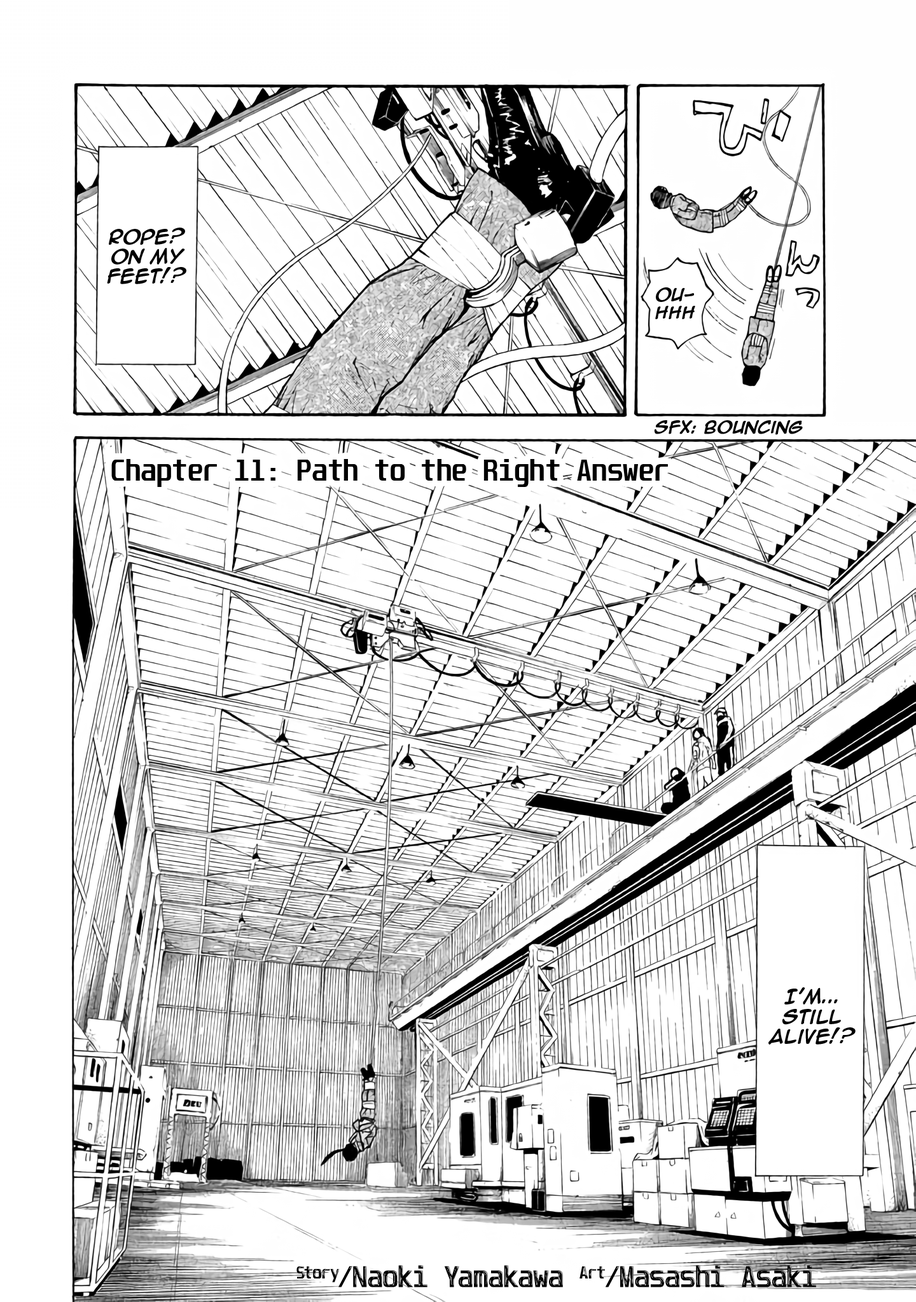
<style>
.page{position:relative;width:916px;height:1302px;background:#ffffff}
.page>*{position:absolute;margin:0}
.t1{font:16.5px "AnimeAce2.0BB-Bold";color:#000000}
.t2{font:14.6px "AnimeAce2.0BB-Bold";color:#000000}
.t3{font:15.9px "AnimeAce2.0BB-Italic";color:#000000;font-weight:bold}
.t4{font:25.4px "Unispace-Bold";color:#000000}
</style>
<div class="page">
<p class="t1" style="left:107px;top:228px;width:79px;height:56px;text-align:center">Rope? on my feet!?</p>
<p class="t2" style="left:655px;top:287px;width:40px;height:32px;text-align:center">Ou-<br>hhh</p>
<p class="t3" style="left:654px;top:420px;width:148px;height:15px">SFX: Bouncing</p>
<p class="t4" style="left:111px;top:459px;width:557px;height:28px">Chapter 11: Path to the Right Answer</p>
<p class="t1" style="left:768px;top:988px;width:87px;height:57px;text-align:center">I'm... still alive!?</p>
</div>
